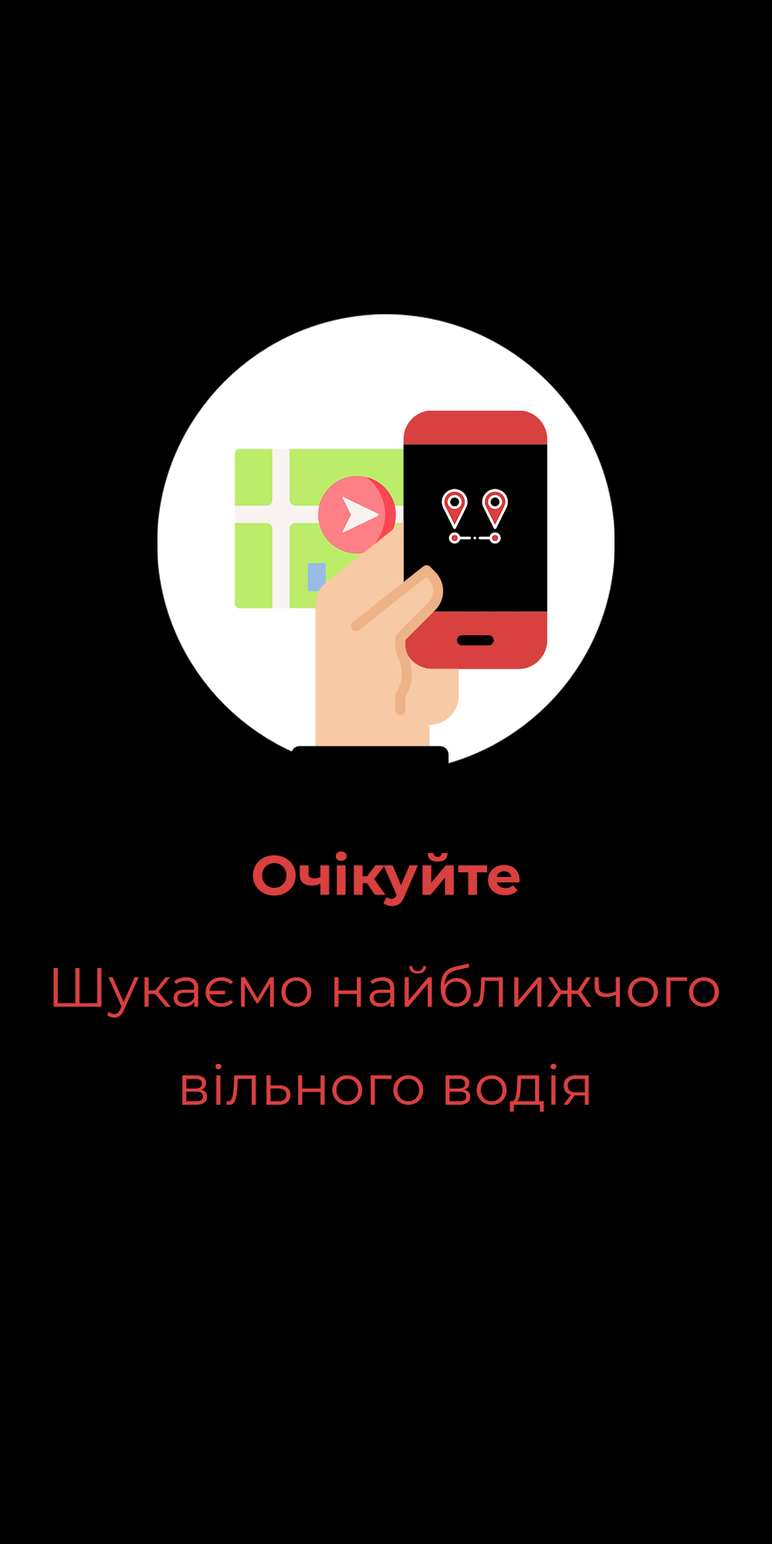
<style>
.page{position:relative;width:772px;height:1544px;background:#000000}
.page>*{position:absolute;margin:0}
.t1{font:55.6px "Montserrat-Bold";color:#d94040}
.t2{font:55.6px "Montserrat-Regular";color:#d94040}
</style>
<div class="page">
<p class="t1" style="left:252px;top:852px;width:268px;height:55px">Очікуйте</p>
<p class="t2" style="left:53px;top:964px;width:667px;height:54px">Шукаємо найближчого</p>
<p class="t2" style="left:182px;top:1064px;width:407px;height:48px">вільного водія</p>
</div>
